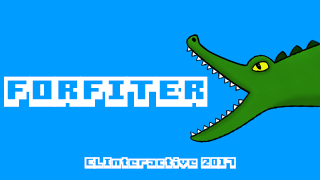
<style>
.page{position:relative;width:320px;height:180px;background:#009cff}
.page>*{position:absolute;margin:0}
.t1{font:30px "Boxy-Bold";color:#ffffff}
.t2{font:11px "Boxy-Bold";color:#ffffff}
</style>
<div class="page">
<p class="t1" style="left:4px;top:76px;width:204px;height:31px">FORFITER</p>
<p class="t2" style="left:84px;top:157px;width:152px;height:12px">CLInteractive 2017</p>
</div>
